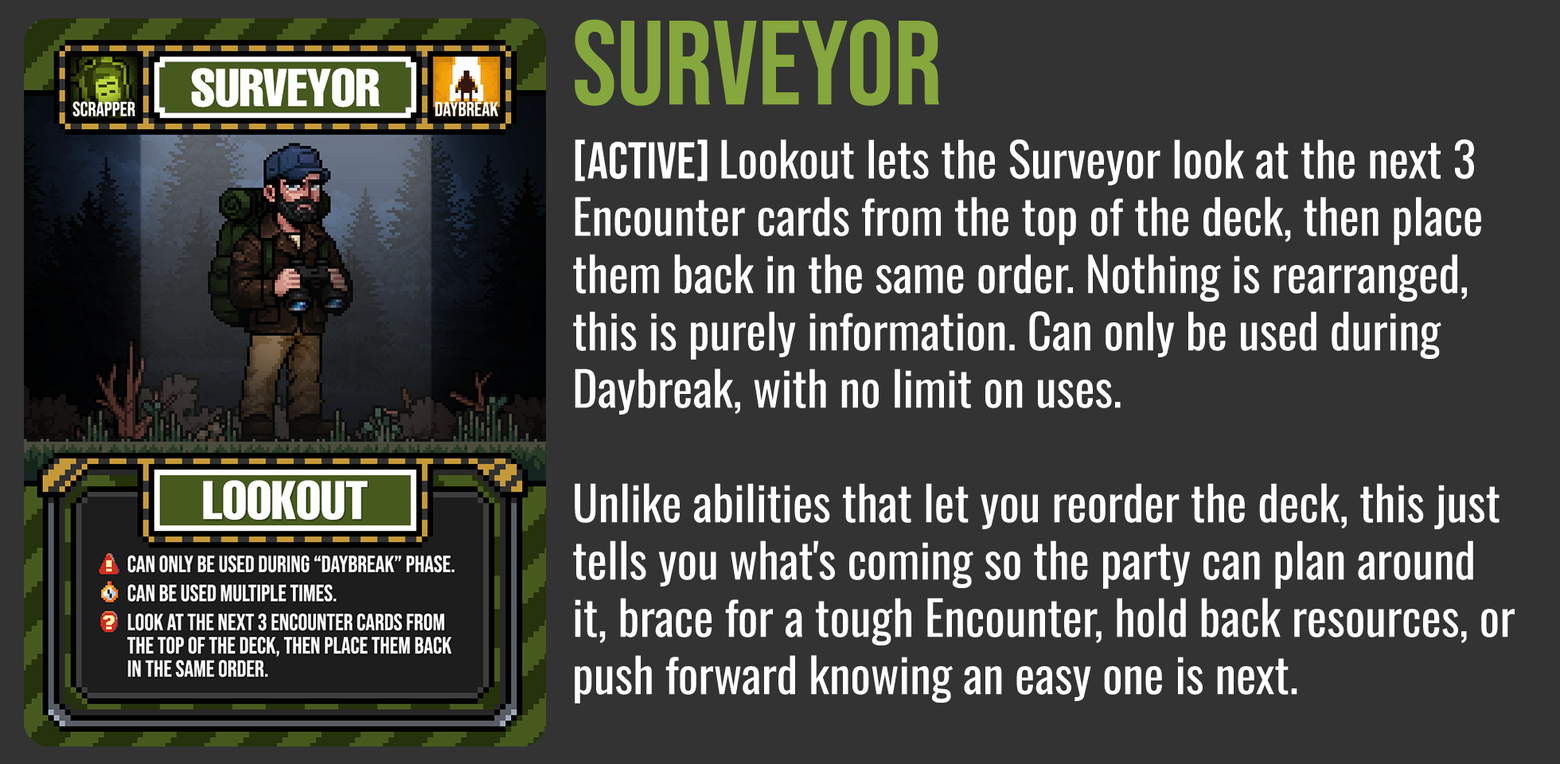
<style>
.page{position:relative;width:1560px;height:764px;background:#333333}
.page>*{position:absolute;margin:0}
.t1{font:119.4px "BebasNeue-Regular";color:#85a73d}
.t2{font:47.8px "Oswald-Regular";color:#ffffff}
.t3{font:51.7px "BebasNeue-Regular";color:#ffffff}
</style>
<div class="page">
<p class="t1" style="left:575px;top:19px;width:365px;height:87px">SURVEYOR</p>
<p class="t2" style="left:573px;top:139px;width:942px;height:565px"><span class="t3">[aCTIVE] </span>Lookout lets the Surveyor look at the next 3 Encounter cards from the top of the deck, then place them back in the same order. Nothing is rearranged, this is purely information. Can only be used during Daybreak, with no limit on uses.<br><br>Unlike abilities that let you reorder the deck, this just tells you what's coming so the party can plan around it, brace for a tough Encounter, hold back resources, or push forward knowing an easy one is next.</p>
</div>
